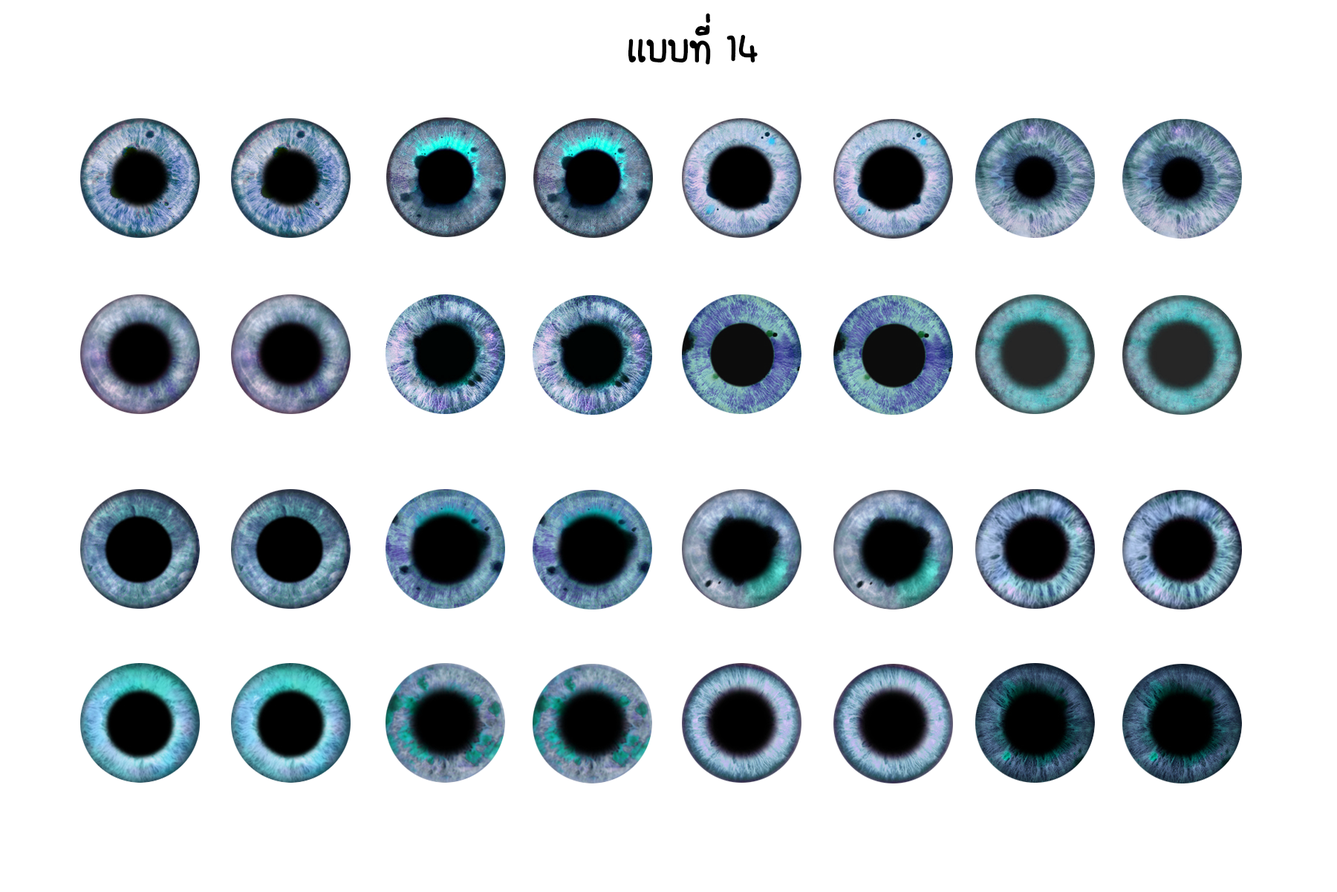
<style>
.page{position:relative;width:1337px;height:892px;background:#ffffff}
.page>*{position:absolute;margin:0}
.t1{font:55.7px "FCDaisyRegular";color:#000000}
</style>
<div class="page">
<p class="t1" style="left:628px;top:13px;width:130px;height:52px">เเบบที่ 14</p>
</div>
